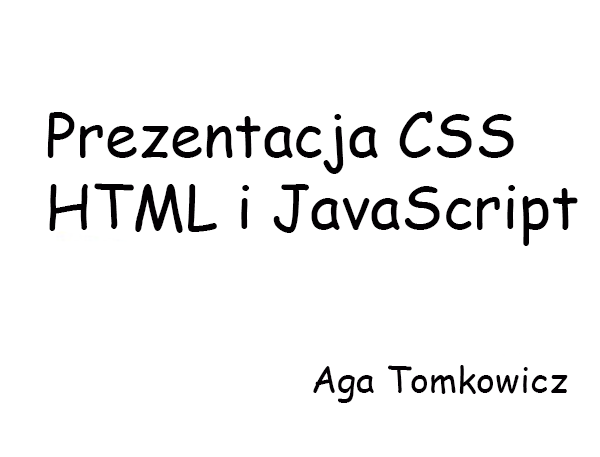
<style>
.page{position:relative;width:600px;height:457px;background:#ffffff}
.page>*{position:absolute;margin:0}
.t1{font:60px "ComicSansMS";color:#020002}
.t2{font:36px "ComicSansMS";color:#030003}
</style>
<div class="page">
<p class="t1" style="left:47px;top:111px;width:531px;height:135px">Prezentacja CSS <br>HTML i JavaScript</p>
<p class="t2" style="left:313px;top:365px;width:255px;height:38px">Aga Tomkowicz</p>
</div>
